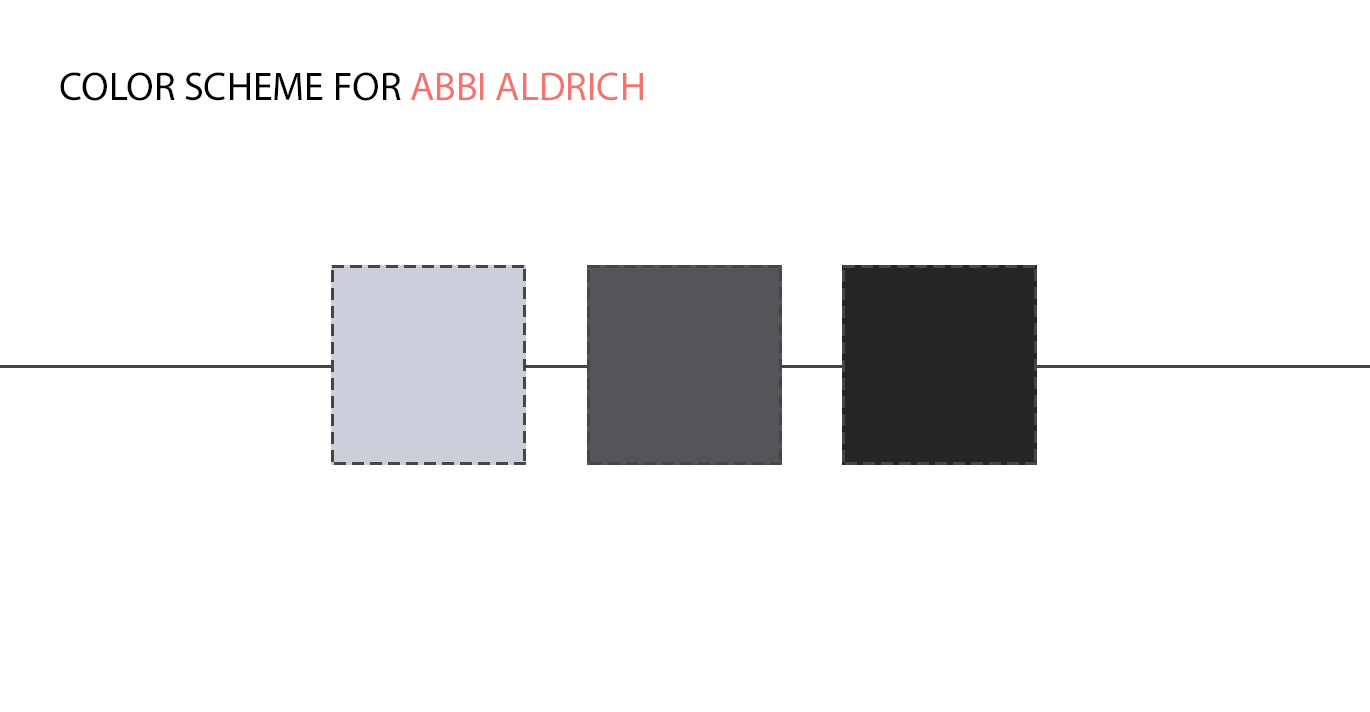
<style>
.page{position:relative;width:1370px;height:712px;background:#ffffff}
.page>*{position:absolute;margin:0}
.t1{font:40px "MyriadPro-Regular";color:#000000;text-transform:uppercase}
.t2{font:40px "MyriadPro-Regular";color:#f3736e;text-transform:uppercase}
</style>
<div class="page">
<p class="t1" style="left:60px;top:72px;width:583px;height:29px">Color Scheme for <span class="t2">Abbi Aldrich</span></p>
</div>
